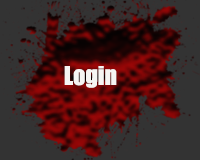
<style>
.page{position:relative;width:200px;height:160px;background:#333333}
.page>*{position:absolute;margin:0}
.t1{font:24px "Impact";color:#f6f5f3}
</style>
<div class="page">
<p class="t1" style="left:64px;top:66px;width:53px;height:22px">Login</p>
</div>
